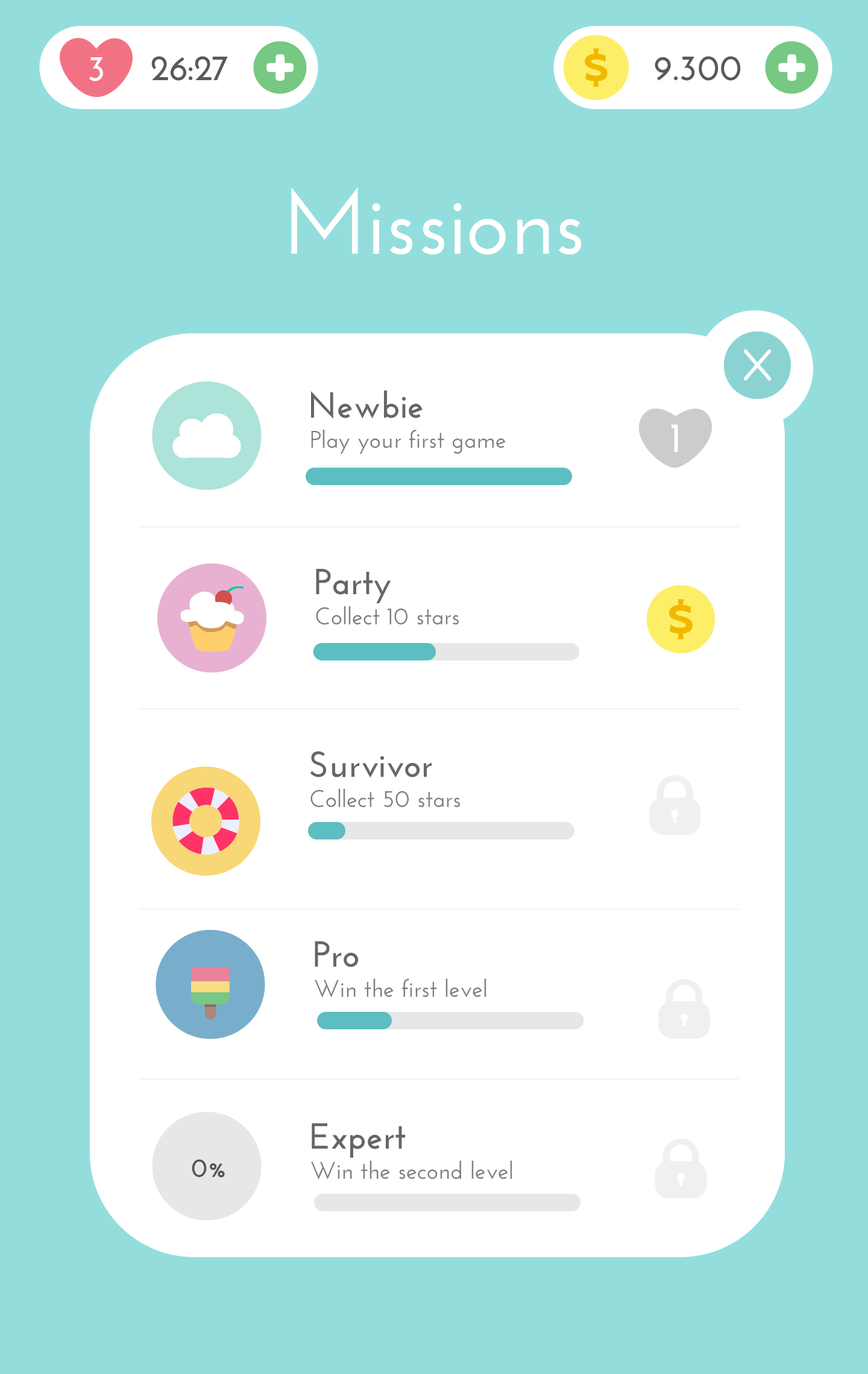
<style>
.page{position:relative;width:868px;height:1374px;background:#ffffff}
.page>*{position:absolute;margin:0}
.t1{font:36.2px "JosefinSans-Bold";color:#ffffff}
.t2{font:36.2px "JosefinSans-Bold";color:#595959}
.t3{font:90.4px "JosefinSans-SemiBold";color:#ffffff}
.t4{font:36.2px "JosefinSans-Bold";color:#666666}
.t5{font:42.2px "JosefinSans-Bold";color:#ffffff}
.t6{font:24.1px "JosefinSans-SemiBold";color:#7e7e7e}
.t7{font:26.5px "JosefinSans-Bold";color:#545454}
</style>
<div class="page">
<p class="t1" style="left:89px;top:57px;width:14px;height:24px">3</p>
<p class="t2" style="left:151px;top:56px;width:77px;height:25px">26:27</p>
<p class="t2" style="left:654px;top:56px;width:87px;height:25px">9.300</p>
<p class="t3" style="left:291px;top:187px;width:290px;height:68px">Missions</p>
<p class="t4" style="left:311px;top:391px;width:111px;height:28px">Newbie</p>
<p class="t5" style="left:671px;top:424px;width:7px;height:28px">1</p>
<p class="t6" style="left:311px;top:430px;width:195px;height:24px">Play your first game</p>
<p class="t4" style="left:316px;top:569px;width:75px;height:34px">Party</p>
<p class="t6" style="left:316px;top:606px;width:143px;height:19px">Collect 10 stars</p>
<p class="t4" style="left:310px;top:751px;width:122px;height:27px">Survivor</p>
<p class="t6" style="left:310px;top:789px;width:150px;height:19px">Collect 50 stars</p>
<p class="t4" style="left:315px;top:941px;width:44px;height:26px">Pro</p>
<p class="t6" style="left:315px;top:979px;width:171px;height:19px">Win the first level</p>
<p class="t4" style="left:312px;top:1123px;width:94px;height:35px">Expert</p>
<p class="t7" style="left:192px;top:1160px;width:33px;height:18px">0%</p>
<p class="t6" style="left:311px;top:1161px;width:201px;height:19px">Win the second level</p>
</div>
